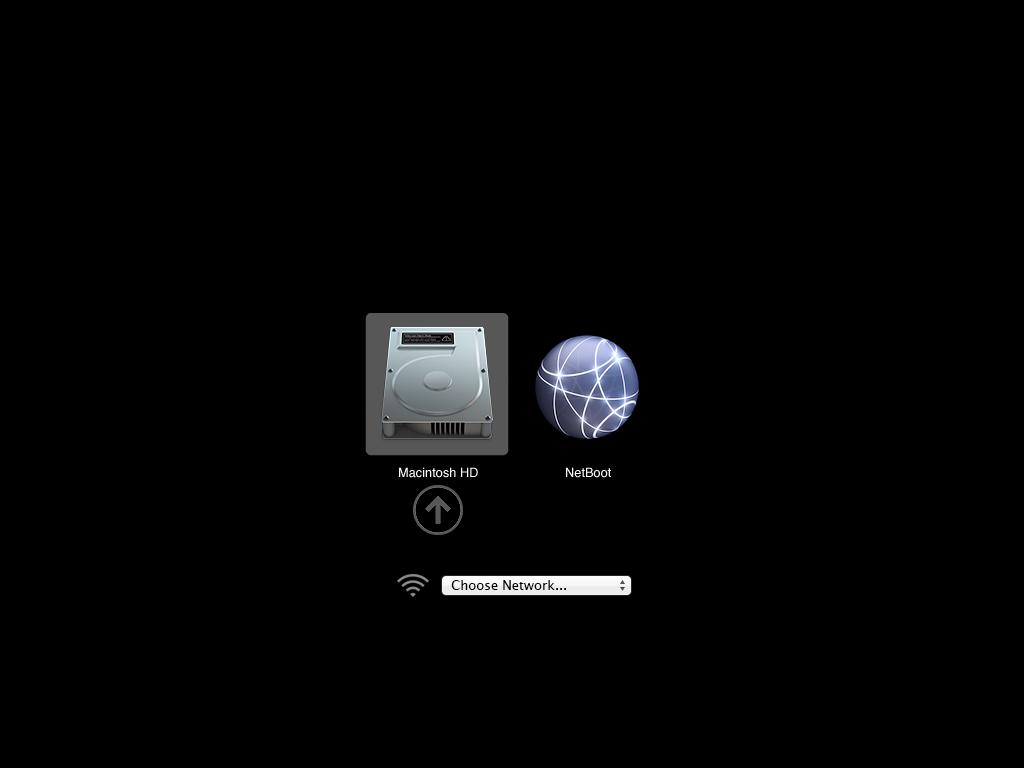
<style>
.page{position:relative;width:1024px;height:768px;background:#000000}
.page>*{position:absolute;margin:0}
.t1{font:12.8px "Helvetica";color:#ffffff}
</style>
<div class="page">
<p class="t1" style="left:399px;top:467px;width:79px;height:11px">Macintosh HD</p>
<p class="t1" style="left:566px;top:467px;width:45px;height:11px">NetBoot</p>
</div>
